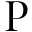
<style>
.page{position:relative;width:32px;height:32px;background:#ffffff}
.page>*{position:absolute;margin:0}
.t1{font:42px "PlayfairDisplay-Regular";color:#000000}
</style>
<div class="page">
<p class="t1" style="left:5px;top:1px;width:23px;height:30px">P</p>
</div>
